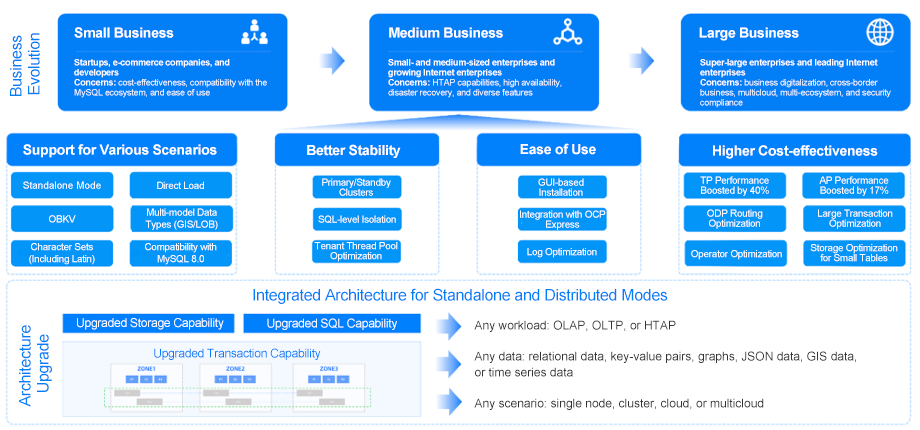
<style>
.page{position:relative;width:920px;height:430px;background:#ffffff}
.page>*{position:absolute;margin:0}
.t1{font:14px "Arial-BoldMT";letter-spacing:-0.02em;color:#ffffff}
.t2{font:16px/18px "ArialMT";letter-spacing:-0.02em;color:#027ff7}
.t3{font:9px/10px "ArialMT";letter-spacing:-0.03em;color:#ffffff}
.t4{font:9px/10px "Arial-BoldMT";letter-spacing:-0.03em;color:#ffffff}
.t5{font:10px "ArialMT";color:#ffffff}
.t6{font:10px "ArialMT";letter-spacing:-0.03em;color:#ffffff}
.t7{font:10px/10px "ArialMT";letter-spacing:-0.03em;color:#ffffff}
.t8{font:10px/12px "ArialMT";letter-spacing:-0.03em;color:#ffffff}
.t9{font:16px "ArialMT";letter-spacing:-0.02em;color:#027ff7}
.t10{font:12px "ArialMT";letter-spacing:-0.02em;color:#ffffff}
.t11{font:12px/16px "ArialMT";color:#333333}
.t12{font:12px "ArialMT";letter-spacing:-0.02em;color:#027ff7}
</style>
<div class="page">
<p class="t1" style="left:74px;top:27px;width:100px;height:11px">Small Business</p>
<p class="t1" style="left:389px;top:27px;width:114px;height:11px">Medium Business</p>
<p class="t1" style="left:699px;top:27px;width:100px;height:14px">Large Business</p>
<p class="t2" style="left:10px;top:33px;width:30px;height:63px;text-align:center;rotate:-90deg">Business <br>Evolution</p>
<p class="t3" style="left:74px;top:59px;width:193px;height:39px"><span class="t4">Startups, e-commerce companies, and developers<br>Concerns:</span> cost-effectiveness, compatibility with the MySQL ecosystem, and ease of use</p>
<p class="t4" style="left:388px;top:59px;width:174px;height:39px">Small- and medium-sized enterprises and growing Internet enterprises<br>Concerns: <span class="t3">HTAP capabilities, high availability, disaster recovery, and diverse features</span></p>
<p class="t3" style="left:700px;top:59px;width:191px;height:49px"><span class="t4">Super-large enterprises and leading Internet enterprises<br>Concerns: </span>business digitalization, cross-border business, multicloud, multi-ecosystem, and security compliance</p>
<p class="t1" style="left:23px;top:144px;width:194px;height:14px">Support for Various Scenarios</p>
<p class="t1" style="left:307px;top:144px;width:94px;height:14px">Better Stability</p>
<p class="t1" style="left:520px;top:143px;width:76px;height:12px">Ease of Use</p>
<p class="t1" style="left:713px;top:145px;width:165px;height:14px">Higher Cost-effectiveness</p>
<p class="t5" style="left:23px;top:181px;width:78px;height:8px">Standalone Mode</p>
<p class="t6" style="left:157px;top:181px;width:47px;height:8px">Direct Load</p>
<p class="t7" style="left:322px;top:178px;width:69px;height:18px;text-align:center">Primary/Standby Clusters</p>
<p class="t7" style="left:538px;top:178px;width:46px;height:18px;text-align:center">GUI-based Installation</p>
<p class="t7" style="left:700px;top:176px;width:69px;height:20px;text-align:center">TP Performance Boosted by 40%</p>
<p class="t7" style="left:819px;top:176px;width:70px;height:20px;text-align:center">AP Performance Boosted by 17%</p>
<p class="t8" style="left:145px;top:208px;width:73px;height:22px;text-align:center">Multi-model Data Types (GIS/LOB)</p>
<p class="t7" style="left:707px;top:209px;width:56px;height:20px;text-align:center">ODP Routing Optimization</p>
<p class="t7" style="left:818px;top:209px;width:75px;height:20px;text-align:center">Large Transaction Optimization</p>
<p class="t6" style="left:49px;top:215px;width:27px;height:8px">OBKV</p>
<p class="t6" style="left:318px;top:215px;width:78px;height:9px">SQL-level Isolation</p>
<p class="t7" style="left:520px;top:210px;width:86px;height:20px;text-align:center">Integration with OCP Express</p>
<p class="t8" style="left:29px;top:243px;width:66px;height:22px;text-align:center">Character Sets (Including Latin)</p>
<p class="t8" style="left:145px;top:243px;width:72px;height:22px;text-align:center">Compatibility with MySQL 8.0</p>
<p class="t7" style="left:314px;top:242px;width:84px;height:20px;text-align:center">Tenant Thread Pool Optimization</p>
<p class="t7" style="left:810px;top:244px;width:88px;height:18px;text-align:center">Storage Optimization for Small Tables</p>
<p class="t6" style="left:527px;top:248px;width:70px;height:10px">Log Optimization</p>
<p class="t6" style="left:691px;top:250px;width:91px;height:10px">Operator Optimization</p>
<p class="t9" style="left:253px;top:288px;width:415px;height:16px">Integrated Architecture for Standalone and Distributed Modes</p>
<p class="t10" style="left:77px;top:318px;width:147px;height:12px">Upgraded Storage Capability</p>
<p class="t10" style="left:267px;top:318px;width:130px;height:12px">Upgraded SQL Capability</p>
<p class="t2" style="left:19px;top:325px;width:33px;height:82px;text-align:center;rotate:-90deg">Architecture <br>Upgrade</p>
<p class="t11" style="left:474px;top:320px;width:382px;height:90px">Any workload: OLAP, OLTP, or HTAP<br>Any data: relational data, key-value pairs, graphs, JSON data, GIS data, or time series data<br>Any scenario: single node, cluster, cloud, or multicloud</p>
<p class="t12" style="left:154px;top:348px;width:167px;height:12px">Upgraded Transaction Capability</p>
</div>
